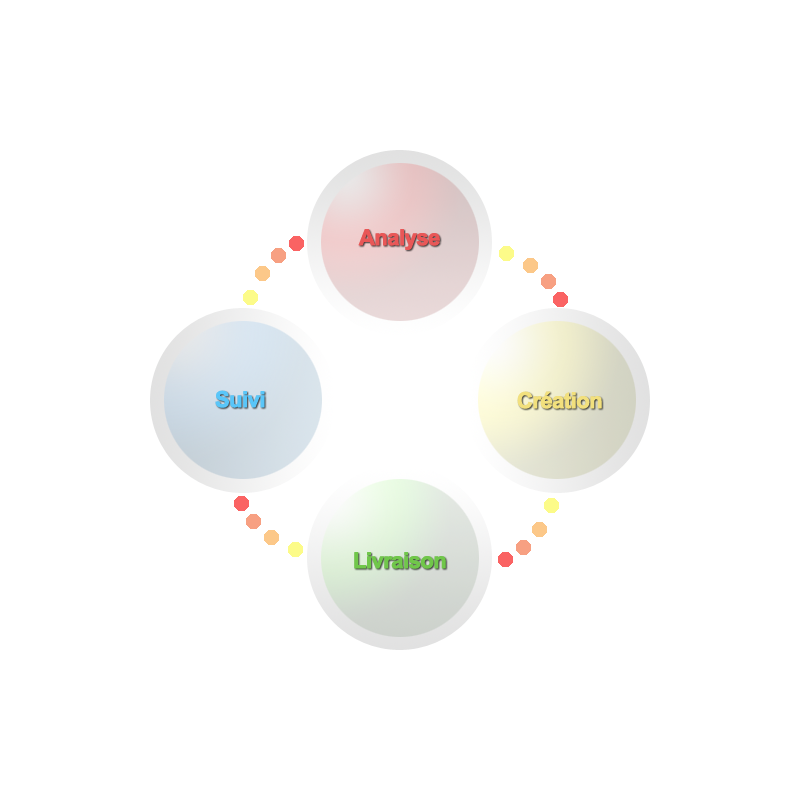
<style>
.page{position:relative;width:800px;height:800px;background:#ffffff}
.page>*{position:absolute;margin:0}
.t1{font:22px "Arial-BoldMT";letter-spacing:-0.05em;color:#e95757;font-weight:bold}
.t2{font:22px "Arial-BoldMT";letter-spacing:-0.05em;color:#59c6f9;font-weight:bold}
.t3{font:22px "Arial-BoldMT";letter-spacing:-0.05em;color:#f2e07d;font-weight:bold}
.t4{font:22px "Arial-BoldMT";letter-spacing:-0.05em;color:#70c74a;font-weight:bold}
</style>
<div class="page">
<p class="t1" style="left:358px;top:229px;width:82px;height:21px">Analyse</p>
<p class="t2" style="left:215px;top:390px;width:50px;height:18px">Suivi</p>
<p class="t3" style="left:517px;top:391px;width:85px;height:18px">Création</p>
<p class="t4" style="left:354px;top:552px;width:92px;height:17px">Livraison</p>
</div>
